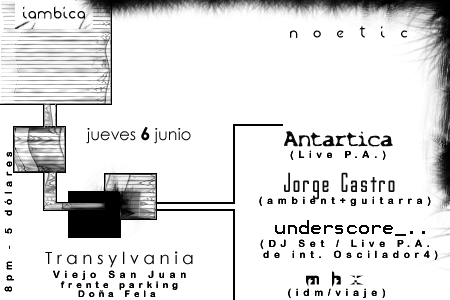
<style>
.page{position:relative;width:450px;height:300px;background:#ffffff}
.page>*{position:absolute;margin:0}
.t1{font:25px "Frazzed";color:#000000}
.t2{font:24px "Frazzed";color:#000000}
.t3{font:16px "CenturyGothic";color:#000000}
.t4{font:18px "CenturyGothic-Bold";color:#000000}
.t5{font:20px "X-Files-Regular";color:#090909}
.t6{font:9.1px "ArialRoundedMTBold";letter-spacing:0.475em;color:#000000}
.t7{font:10px "ArialRoundedMTBold";letter-spacing:0.475em;color:#000000}
.t8{font:24px "GothamNightsNormal";color:#0e0e0e}
.t9{font:16px "Terminal";color:#070707}
.t10{font:16.7px "CenturyGothic";color:#020202}
.t11{font:9px "ArialRoundedMTBold";letter-spacing:0.475em;color:#010101}
.t12{font:25px "Sprutfest";color:#020202}
</style>
<div class="page">
<p class="t1" style="left:23px;top:6px;width:62px;height:14px">iambica</p>
<p class="t2" style="left:290px;top:25px;width:117px;height:14px">n  o  e  t  i  c</p>
<p class="t3" style="left:86px;top:126px;width:105px;height:18px">jueves <span class="t4">6</span> junio</p>
<p class="t5" style="left:284px;top:131px;width:109px;height:16px">Antartica</p>
<p class="t6" style="left:290px;top:150px;width:96px;height:10px">(Live P.A.)</p>
<p class="t7" style="left:4px;top:152px;width:10px;height:140px;rotate:-90deg">8pm - 5 dólares</p>
<p class="t8" style="left:284px;top:172px;width:111px;height:28px">Jorge Castro</p>
<p class="t7" style="left:259px;top:196px;width:172px;height:10px">(ambient+guitarra)</p>
<p class="t9" style="left:275px;top:220px;width:150px;height:16px">underscore_..</p>
<p class="t7" style="left:260px;top:239px;width:169px;height:10px">(DJ Set / Live P.A.</p>
<p class="t10" style="left:45px;top:251px;width:148px;height:17px">T r a n s y l v a n i a</p>
<p class="t6" style="left:263px;top:250px;width:175px;height:10px">de int. Oscilador4)</p>
<p class="t7" style="left:53px;top:270px;width:133px;height:10px">Viejo San Juan</p>
<p class="t11" style="left:60px;top:281px;width:118px;height:9px">frente parking</p>
<p class="t12" style="left:306px;top:271px;width:58px;height:16px">m h x</p>
<p class="t11" style="left:78px;top:290px;width:78px;height:7px">Doña Fela</p>
<p class="t7" style="left:288px;top:288px;width:97px;height:10px">(idm/viaje)</p>
</div>
